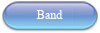
<style>
.page{position:relative;width:100px;height:33px}
.page>*{position:absolute;margin:0}
.t1{font:12.1px "TimesNewRomanPSMT";color:#fefefe}
</style>
<div class="page">
<p class="t1" style="left:36px;top:10px;width:27px;height:9px">Band</p>
</div>
